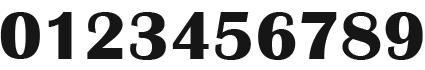
<style>
.page{position:relative;width:425px;height:70px;background:#ffffff}
.page>*{position:absolute;margin:0}
.t1{font:69.7px "BritannicBold";color:#161616;font-variant:small-caps}
</style>
<div class="page">
<p class="t1" style="left:0px;top:12px;width:423px;height:48px">0123456789</p>
</div>
